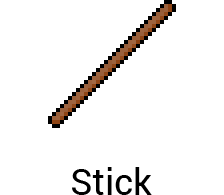
<style>
.page{position:relative;width:224px;height:195px;background:#ffffff}
.page>*{position:absolute;margin:0}
.t1{font:36.7px "Roboto-Regular";color:#000000}
</style>
<div class="page">
<p class="t1" style="left:72px;top:167px;width:80px;height:28px">Stick</p>
</div>
